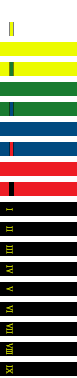
<style>
.page{position:relative;width:77px;height:378px;background:#ffffff}
.page>*{position:absolute;margin:0}
.t1{font:8.4px "TimesNewRomanPSMT";font-weight:bold;scale:0.85 1}
.t2{font:8.4px "TimesNewRomanPSMT";color:#d8e502;text-transform:uppercase;font-weight:bold;scale:0.85 1}
.t3{font:8.4px "TimesNewRomanPSMT";scale:0.85 1}
</style>
<div class="page">
<p class="t1" style="left:6px;top:208px;width:7px;height:3px;rotate:90deg">I</p>
<p class="t1" style="left:6px;top:226px;width:7px;height:6px;rotate:90deg">II</p>
<p class="t1" style="left:6px;top:245px;width:7px;height:9px;rotate:90deg">III</p>
<p class="t1" style="left:6px;top:265px;width:7px;height:9px;rotate:90deg">IV</p>
<p class="t2" style="left:6px;top:286px;width:7px;height:6px;rotate:90deg">V</p>
<p class="t1" style="left:6px;top:305px;width:7px;height:8px;rotate:90deg">VI</p>
<p class="t1" style="left:6px;top:323px;width:7px;height:11px;rotate:90deg">VII</p>
<p class="t3" style="left:6px;top:343px;width:7px;height:12px;rotate:90deg">VIII</p>
<p class="t3" style="left:6px;top:343px;width:7px;height:12px;rotate:90deg">VIII</p>
<p class="t1" style="left:6px;top:365px;width:7px;height:9px;rotate:90deg">IX</p>
</div>
